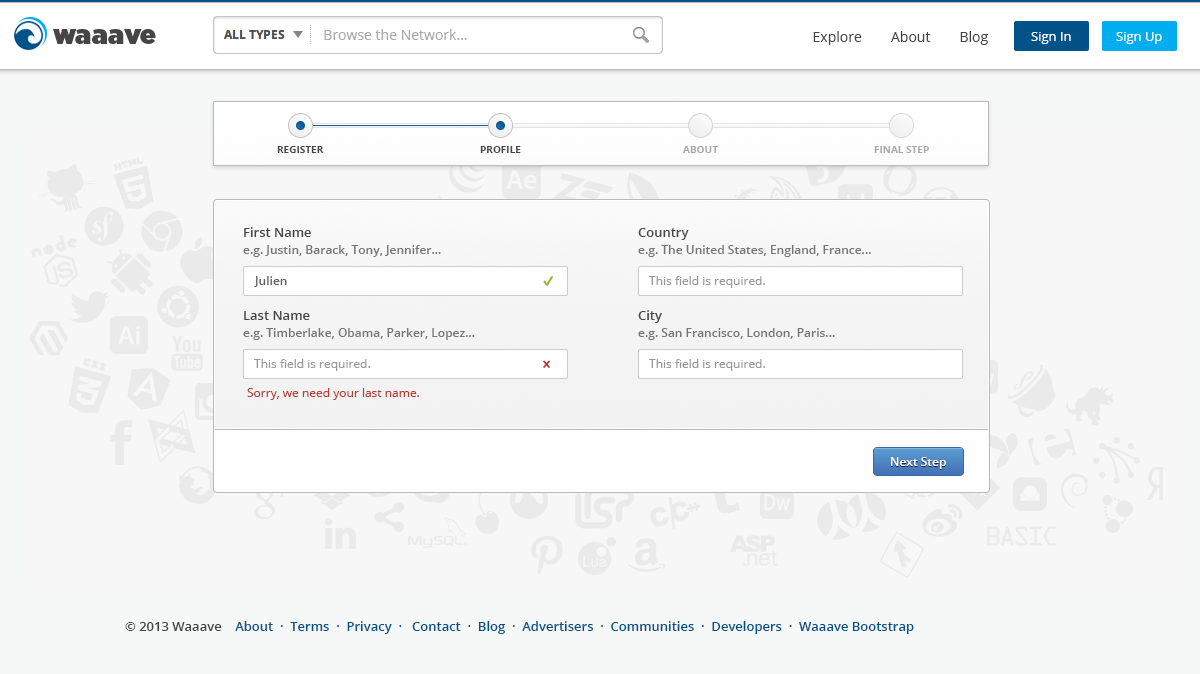
<style>
.page{position:relative;width:1200px;height:674px;background:#f7f7f7}
.page>*{position:absolute;margin:0}
.t1{font:14px "OpenSans";color:#a9a9a9}
.t2{font:14px "OpenSans";color:#454545}
.t3{font:13px "OpenSans";color:#ffffff}
.t4{font:10px "OpenSans-Bold";color:#454545}
.t5{font:10px "OpenSans-Bold";color:#aaaaaa}
.t6{font:13px "OpenSans-Semibold";color:#454545}
.t7{font:12px "OpenSans-Semibold";color:#757575}
.t8{font:12px "OpenSans-Semibold";color:#606060}
.t9{font:12px "OpenSans";color:#999999}
.t10{font:12px "OpenSans";color:#ba3a2f}
.t11{font:12px "OpenSans-Semibold";color:#ffffff}
.t12{font:13px "OpenSans-Semibold";color:#015289}
</style>
<div class="page">
<p class="t1" style="left:324px;top:29px;width:143px;height:11px">Browse the Network...</p>
<p class="t2" style="left:813px;top:31px;width:175px;height:14px">Explore        About        Blog</p>
<p class="t3" style="left:1031px;top:32px;width:40px;height:12px">Sign In</p>
<p class="t3" style="left:1116px;top:32px;width:46px;height:12px">Sign Up</p>
<p class="t4" style="left:277px;top:146px;width:47px;height:7px">REGISTER</p>
<p class="t4" style="left:480px;top:146px;width:41px;height:7px">PROFILE</p>
<p class="t5" style="left:683px;top:146px;width:35px;height:7px">ABOUT</p>
<p class="t5" style="left:874px;top:146px;width:55px;height:7px">FINAL STEP</p>
<p class="t6" style="left:244px;top:227px;width:67px;height:10px">First Name</p>
<p class="t6" style="left:638px;top:228px;width:51px;height:12px">Country</p>
<p class="t7" style="left:243px;top:245px;width:198px;height:12px">e.g. Justin, Barack, Tony, Jennifer...</p>
<p class="t7" style="left:638px;top:245px;width:233px;height:12px">e.g. The United States, England, France...</p>
<p class="t8" style="left:254px;top:276px;width:33px;height:11px">Julien</p>
<p class="t9" style="left:649px;top:276px;width:116px;height:12px">This field is required.</p>
<p class="t6" style="left:244px;top:311px;width:66px;height:9px">Last Name</p>
<p class="t6" style="left:638px;top:310px;width:24px;height:13px">City</p>
<p class="t7" style="left:243px;top:328px;width:232px;height:12px">e.g. Timberlake, Obama, Parker, Lopez...</p>
<p class="t7" style="left:638px;top:328px;width:197px;height:12px">e.g. San Francisco, London, Paris...</p>
<p class="t9" style="left:254px;top:359px;width:116px;height:12px">This field is required.</p>
<p class="t9" style="left:649px;top:359px;width:116px;height:12px">This field is required.</p>
<p class="t10" style="left:247px;top:388px;width:172px;height:12px">Sorry, we need your last name.</p>
<p class="t11" style="left:891px;top:457px;width:55px;height:12px">Next Step</p>
<p class="t12" style="left:125px;top:621px;width:789px;height:13px"><span class="t6">© 2013 Waaave</span>    About  ·  Terms  ·  Privacy  ·   Contact  ·  Blog  ·  Advertisers  ·  Communities  ·  Developers  ·  Waaave Bootstrap</p>
</div>
